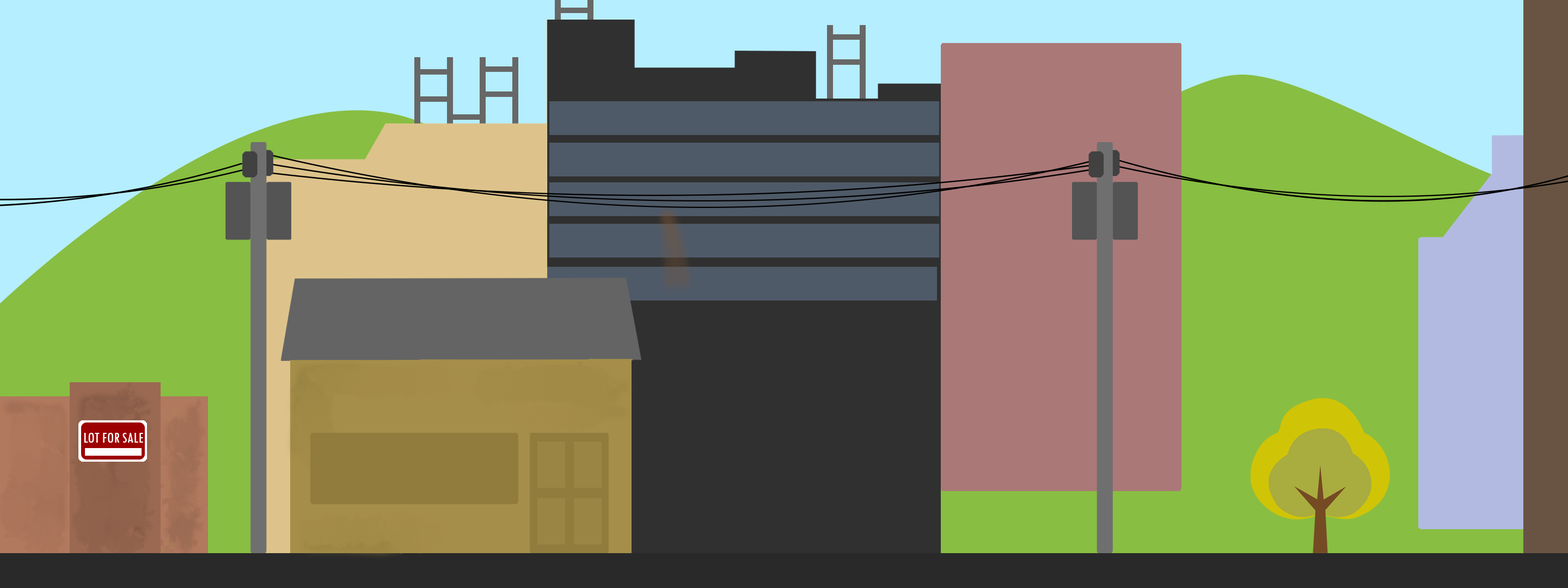
<style>
.page{position:relative;width:1568px;height:588px}
.page>*{position:absolute;margin:0}
.t1{font:15.2px "TwCenMT-Condensed";color:#ffffff}
</style>
<div class="page">
<p class="t1" style="left:84px;top:433px;width:59px;height:10px">LOT FOR SALE</p>
</div>
